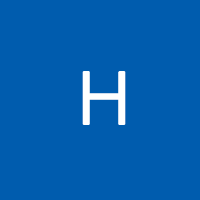
<style>
.page{position:relative;width:200px;height:200px;background:#005cae}
.page>*{position:absolute;margin:0}
.t1{font:72px "Helvetica-Light";color:#ffffff;font-weight:bold}
</style>
<div class="page">
<p class="t1" style="left:82px;top:71px;width:44px;height:54px">H</p>
</div>
